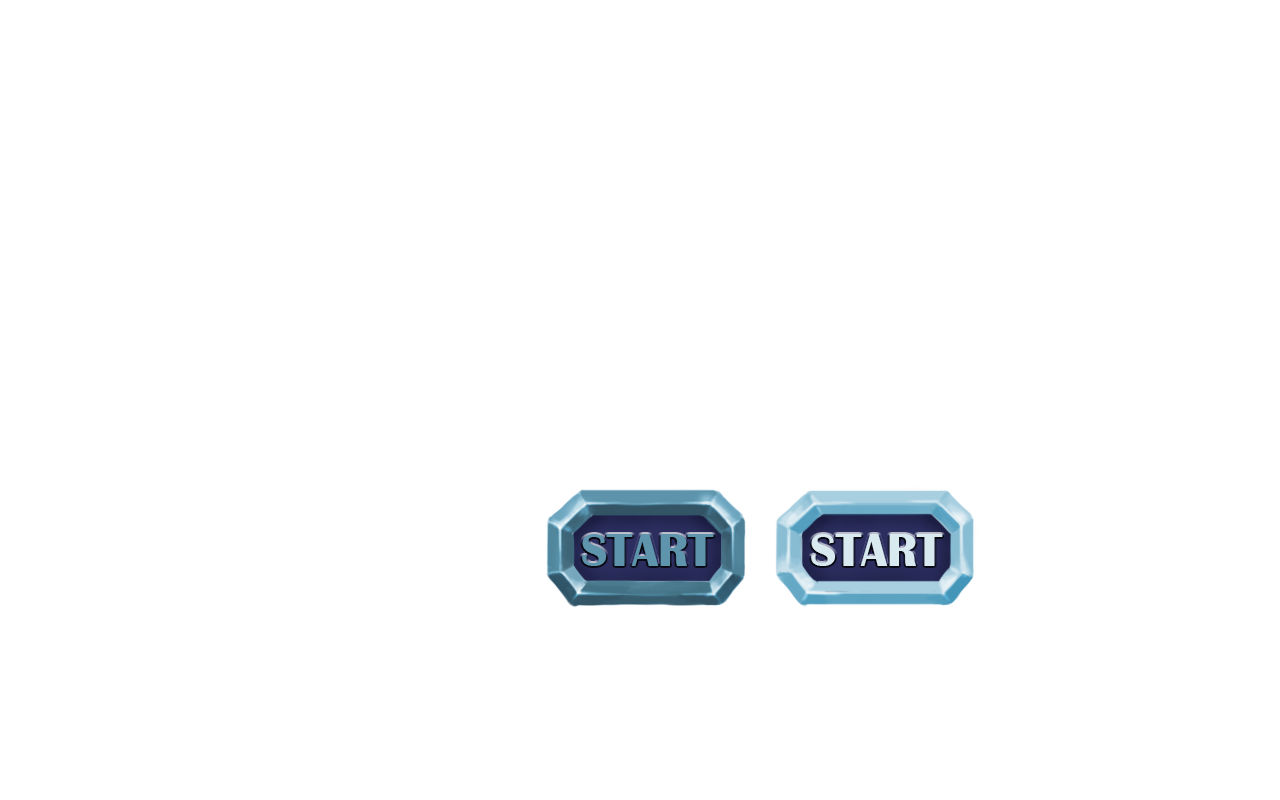
<style>
.page{position:relative;width:1280px;height:800px;background:#ffffff}
.page>*{position:absolute;margin:0}
.t1{font:48px "BritannicBold";color:#5e95ad;text-transform:uppercase}
.t2{font:48px "BritannicBold";color:#d8e9f0;text-transform:uppercase}
</style>
<div class="page">
<p class="t1" style="left:582px;top:534px;width:132px;height:32px">start</p>
<p class="t2" style="left:811px;top:534px;width:132px;height:32px">start</p>
</div>
